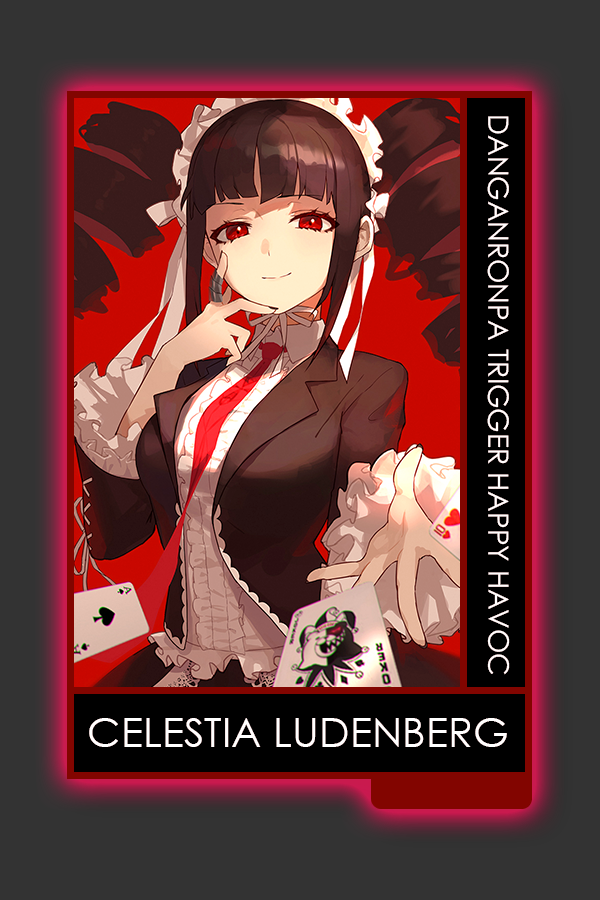
<style>
.page{position:relative;width:600px;height:900px;background:#333333}
.page>*{position:absolute;margin:0}
.t1{font:27.9px "CenturyGothic";color:#ffffff}
.t2{font:41.2px "CenturyGothic";color:#ffffff}
</style>
<div class="page">
<p class="t1" style="left:487px;top:116px;width:23px;height:559px;rotate:90deg">DANGANRONPA TRIGGER HAPPY HAVOC</p>
<p class="t2" style="left:89px;top:718px;width:418px;height:29px">CELESTIA LUDENBERG</p>
</div>
